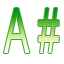
<style>
.page{position:relative;width:64px;height:64px;background:#ffffff}
.page>*{position:absolute;margin:0}
.t1{font:61.6px "ArialMT";scale:0.61 1}
</style>
<div class="page">
<p class="t1" style="left:3px;top:8px;width:56px;height:45px">A #</p>
</div>
